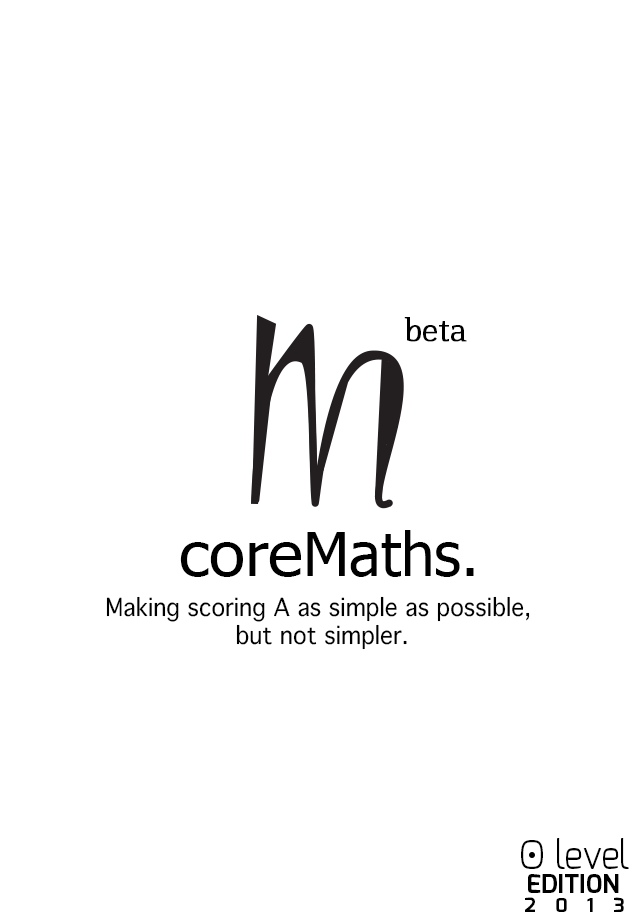
<style>
.page{position:relative;width:640px;height:920px;background:#ffffff}
.page>*{position:absolute;margin:0}
.t1{font:30px "Aftaserif";color:#000000;font-weight:bold}
.t2{font:60px "Tahoma";color:#000000}
.t3{font:60px "Tahoma";color:#000000;scale:1.1 1}
.t4{font:24px/28.2px "Thonburi";color:#000000;scale:0.94 1}
.t5{font:39.4px "Exo-Light";color:#000000;scale:0.9 1}
.t6{font:39.4px "Exo-Light";color:#000000}
.t7{font:25.4px "Exo-Bold";color:#000000}
.t8{font:19.3px "Exo-Bold";color:#000000}
</style>
<div class="page">
<p class="t1" style="left:404px;top:317px;width:63px;height:25px">beta</p>
<p class="t2" style="left:180px;top:530px;width:294px;height:47px"><span class="t3">core</span>Maths.</p>
<p class="t4" style="left:106px;top:596px;width:424px;height:54px;text-align:center">Making scoring A as simple as possible, <br>but not simpler.</p>
<p class="t5" style="left:521px;top:838px;width:108px;height:31px"><span class="t6">O </span>level</p>
<p class="t7" style="left:528px;top:874px;width:91px;height:19px">EDITION</p>
<p class="t8" style="left:525px;top:897px;width:99px;height:15px">2    0    1    3</p>
</div>
